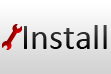
<style>
.page{position:relative;width:111px;height:74px}
.page>*{position:absolute;margin:0}
.t1{font:36px "Calibri"}
</style>
<div class="page">
<p class="t1" style="left:24px;top:25px;width:83px;height:24px">Install</p>
</div>
